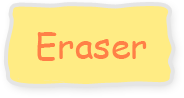
<style>
.page{position:relative;width:184px;height:98px;background:#ffec84}
.page>*{position:absolute;margin:0}
.t1{font:36px "ComicSansMS";color:#ff8047}
</style>
<div class="page">
<p class="t1" style="left:37px;top:32px;width:110px;height:29px">Eraser</p>
</div>
